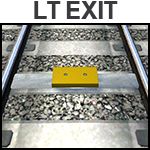
<style>
.page{position:relative;width:150px;height:150px}
.page>*{position:absolute;margin:0}
.t1{font:28px "BritishRailDarkNormal";color:#3a3a3d}
</style>
<div class="page">
<p class="t1" style="left:34px;top:1px;width:84px;height:18px">LT EXIT</p>
</div>
